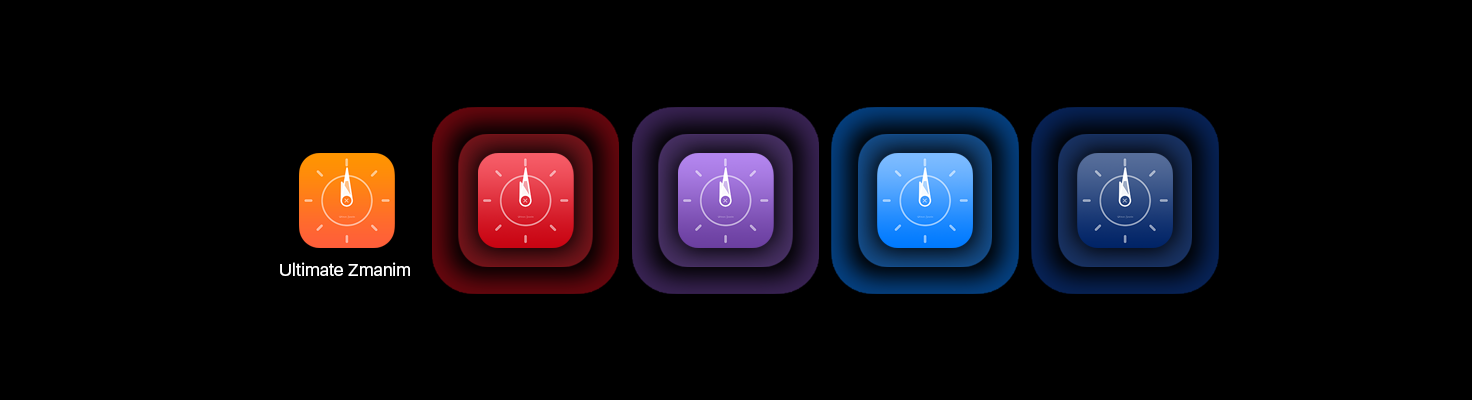
<style>
.page{position:relative;width:1472px;height:400px;background:#000000}
.page>*{position:absolute;margin:0}
.t1{font:17.7px "SFUIDisplay-Regular";color:#ffffff}
</style>
<div class="page">
<p class="t1" style="left:280px;top:262px;width:130px;height:14px">Ultimate Zmanim</p>
</div>
